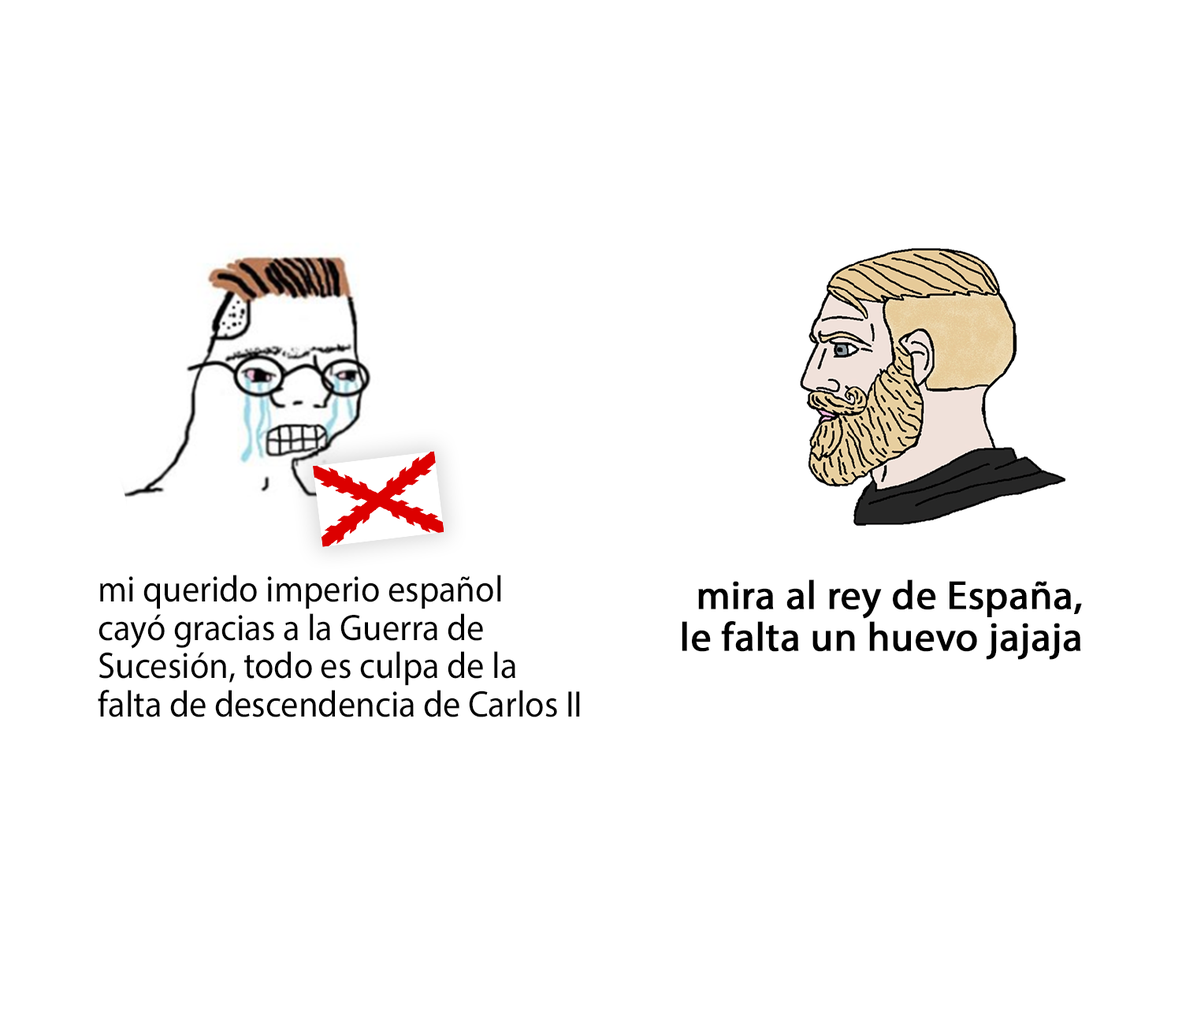
<style>
.page{position:relative;width:1182px;height:1009px;background:#ffffff}
.page>*{position:absolute;margin:0}
.t1{font:37.1px "MyriadPro-Regular";color:#000000;scale:0.95 1}
.t2{font:40.5px "MyriadPro-Regular";color:#000000;font-weight:bold}
</style>
<div class="page">
<p class="t1" style="left:98px;top:575px;width:482px;height:142px">mi querido imperio español<br>cayó gracias a la Guerra de <br>Sucesión, todo es culpa de la<br>falta de descendencia de Carlos II</p>
<p class="t2" style="left:682px;top:579px;width:400px;height:81px;text-align:right">mira al rey de España,<br>le falta un huevo jajaja</p>
</div>
